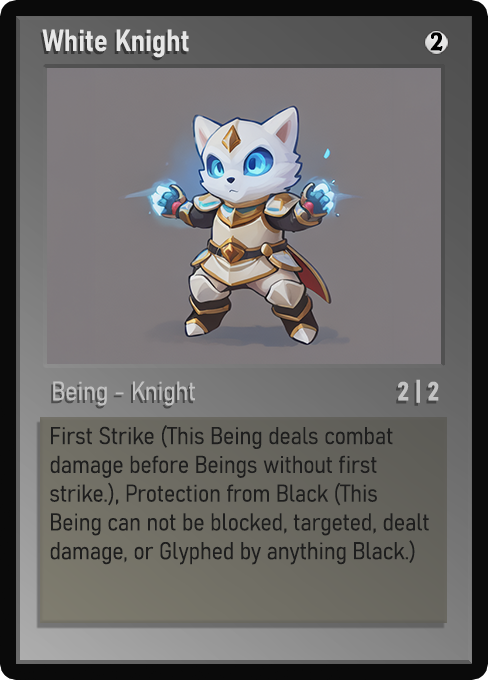
<style>
.page{position:relative;width:488px;height:680px}
.page>*{position:absolute;margin:0}
.t1{font:30px "Bahnschrift-SemiBoldSemiCondensed";color:#f2f2f2;font-weight:bold}
.t2{font:25px "WTRRoycroft";color:#000000;font-weight:bold;scale:1.09 1}
.t3{font:26px "Bahnschrift-LightSemiCondensed";color:#c8c8c8;font-weight:bold}
.t4{font:26px "Bahnschrift-BoldSemiCondensed";color:#c3c3c3;font-weight:bold}
.t5{font:24px "Bahnschrift-LightSemiCondensed";color:#1e1e1e;font-weight:bold}
</style>
<div class="page">
<p class="t1" style="left:42px;top:29px;width:147px;height:29px;opacity:0.9">White Knight</p>
<p class="t2" style="left:430px;top:32px;width:13px;height:19px">2</p>
<p class="t3" style="left:53px;top:381px;width:142px;height:25px;opacity:0.9">Being - Knight</p>
<p class="t4" style="left:398px;top:379px;width:41px;height:24px">2 | 2</p>
<p class="t5" style="left:50px;top:425px;width:379px;height:140px">First Strike (This Being deals combat damage before Beings without first strike.), Protection from Black (This Being can not be blocked, targeted, dealt damage, or Glyphed by anything Black.)</p>
</div>
